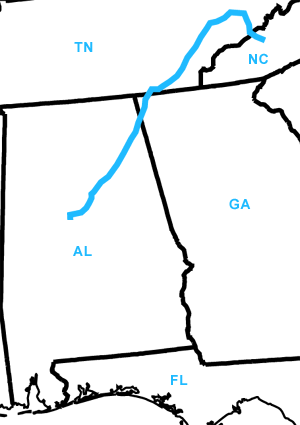
<style>
.page{position:relative;width:300px;height:425px;background:#ffffff}
.page>*{position:absolute;margin:0}
.t1{font:14px "Arial-BoldMT";letter-spacing:0.05em;color:#1fbaff}
</style>
<div class="page">
<p class="t1" style="left:74px;top:42px;width:19px;height:10px">TN</p>
<p class="t1" style="left:249px;top:53px;width:19px;height:11px">NC</p>
<p class="t1" style="left:229px;top:198px;width:22px;height:12px">GA</p>
<p class="t1" style="left:73px;top:246px;width:19px;height:10px">AL</p>
<p class="t1" style="left:171px;top:375px;width:17px;height:10px">FL</p>
</div>
